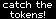
<style>
.page{position:relative;width:56px;height:19px;background:#000000}
.page>*{position:absolute;margin:0}
.t1{font:15px/10px "5x7-practical";color:#ffffff}
</style>
<div class="page">
<p class="t1" style="left:3px;top:1px;width:49px;height:17px;text-align:center">catch the<br>tokens!</p>
</div>
